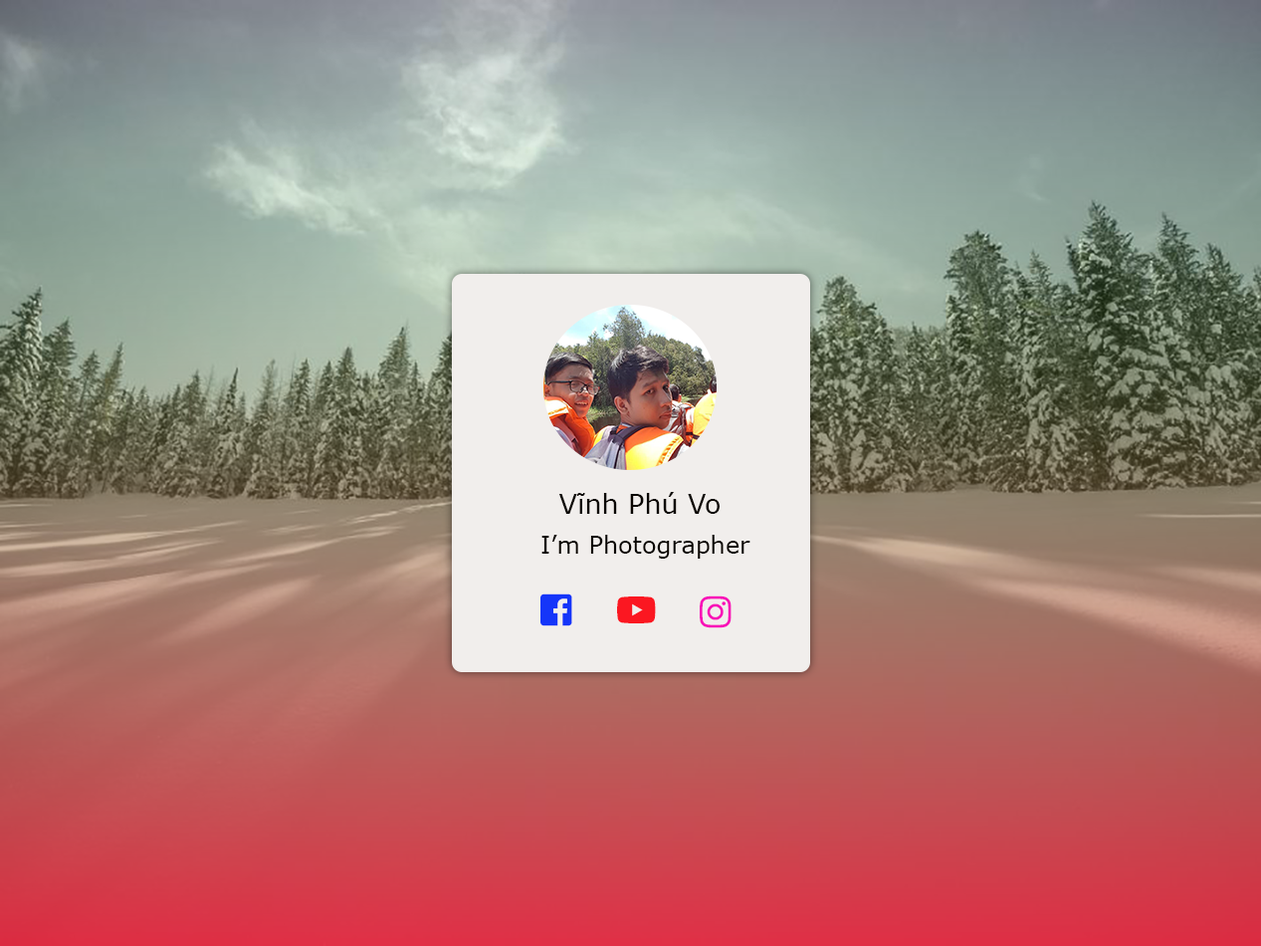
<style>
.page{position:relative;width:1261px;height:946px}
.page>*{position:absolute;margin:0}
.t1{font:26.9px "MSReferenceSansSerif";color:#090400}
.t2{font:23.9px "MSReferenceSansSerif";color:#090400}
</style>
<div class="page">
<p class="t1" style="left:558px;top:492px;width:162px;height:22px">Vĩnh Phú Vo</p>
<p class="t2" style="left:541px;top:534px;width:209px;height:24px">I’m Photographer</p>
</div>
